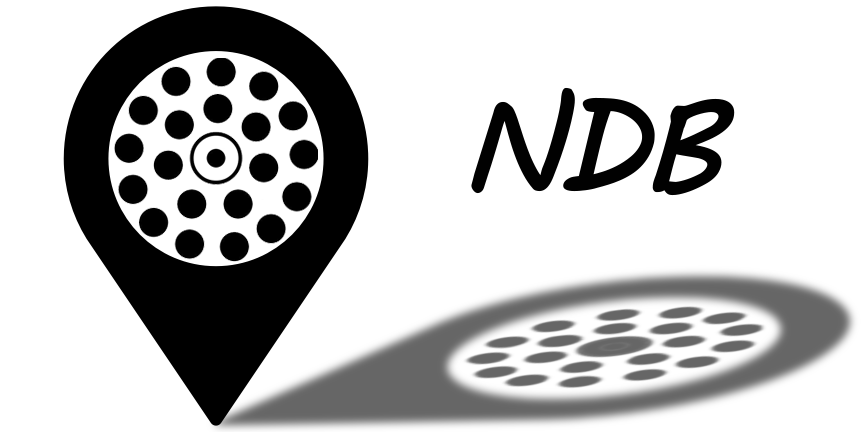
<style>
.page{position:relative;width:864px;height:432px;background:#ffffff}
.page>*{position:absolute;margin:0}
.t1{font:130px "MVBoli";letter-spacing:-0.05em;color:#010101;font-weight:bold}
</style>
<div class="page">
<p class="t1" style="left:471px;top:87px;width:264px;height:109px">NDB</p>
</div>
